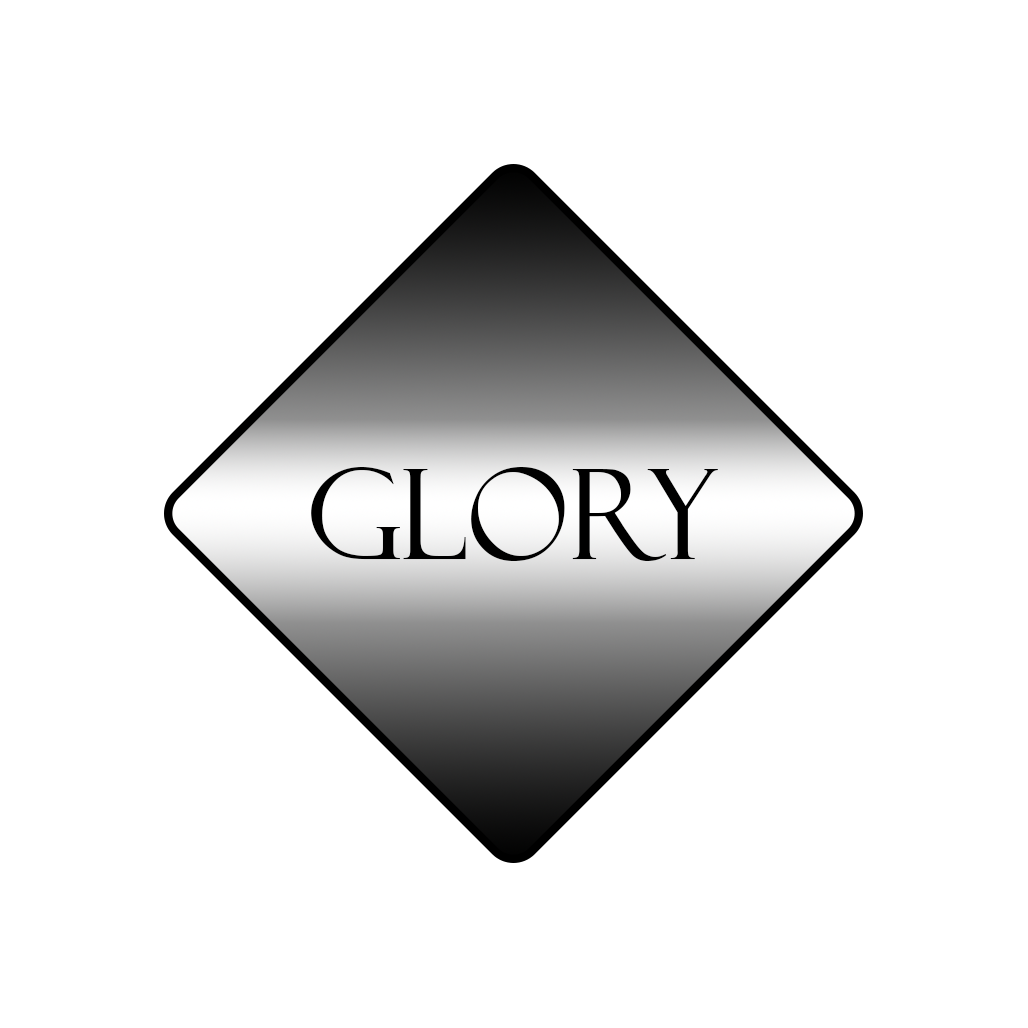
<style>
.page{position:relative;width:1028px;height:1028px;background:#ffffff}
.page>*{position:absolute;margin:0}
.t1{font:125px "FelixTitlingMT";color:#000000}
</style>
<div class="page">
<p class="t1" style="left:311px;top:467px;width:407px;height:94px">GLORY</p>
</div>
